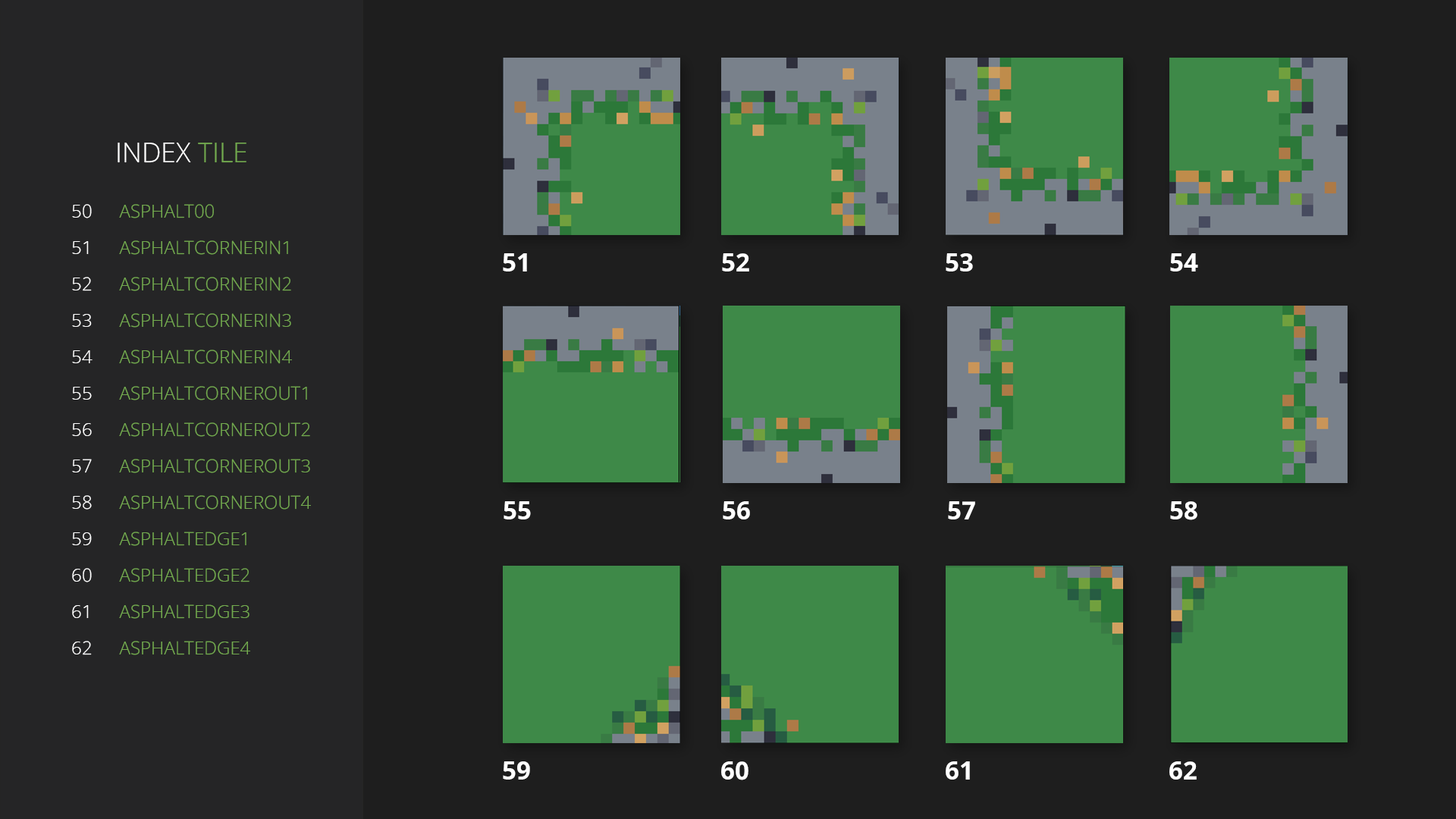
<style>
.page{position:relative;width:1456px;height:819px;background:#1e1e1e}
.page>*{position:absolute;margin:0}
.t1{font:27.3px "OpenSans-Light";color:#ffffff;text-transform:uppercase}
.t2{font:27.3px "OpenSans-Light";color:#73aa4f;text-transform:uppercase}
.t3{font:18.2px/36.4px "OpenSans-Light";color:#ffffff;text-transform:uppercase}
.t4{font:18.2px/36.4px "OpenSans-Light";color:#73aa4f;text-transform:uppercase}
.t5{font:25.1px "OpenSans-Bold";color:#ffffff;text-transform:uppercase}
</style>
<div class="page">
<p class="t1" style="left:118px;top:143px;width:128px;height:20px">index<span class="t2"> tile</span></p>
<p class="t3" style="left:72px;top:204px;width:21px;height:451px;text-align:center">50<br>51<br>52<br>53<br>54<br>55<br>56<br>57<br>58<br>59<br>60<br>61<br>62</p>
<p class="t4" style="left:119px;top:204px;width:192px;height:451px">asphalt00<br>asphaltCornerIn1<br>asphaltCornerIn2<br>asphaltCornerIn3<br>asphaltCornerIn4<br>asphaltCornerOut1<br>asphaltCornerOut2<br>asphaltCornerOut3<br>asphaltCornerOut4<br>asphaltEdge1<br>asphaltEdge2<br>asphaltEdge3<br>asphaltEdge4</p>
<p class="t5" style="left:503px;top:253px;width:24px;height:18px">51</p>
<p class="t5" style="left:722px;top:253px;width:27px;height:18px">52</p>
<p class="t5" style="left:946px;top:253px;width:27px;height:18px">53</p>
<p class="t5" style="left:1170px;top:253px;width:28px;height:18px">54</p>
<p class="t5" style="left:504px;top:501px;width:27px;height:18px">55</p>
<p class="t5" style="left:723px;top:501px;width:27px;height:18px">56</p>
<p class="t5" style="left:948px;top:501px;width:27px;height:18px">57</p>
<p class="t5" style="left:1170px;top:501px;width:27px;height:19px">58</p>
<p class="t5" style="left:503px;top:761px;width:27px;height:19px">59</p>
<p class="t5" style="left:721px;top:761px;width:27px;height:19px">60</p>
<p class="t5" style="left:946px;top:761px;width:24px;height:19px">61</p>
<p class="t5" style="left:1169px;top:761px;width:28px;height:19px">62</p>
</div>
